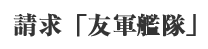
<style>
.page{position:relative;width:208px;height:49px;background:#ffffff}
.page>*{position:absolute;margin:0}
.t1{font:24px "RyuminPr6N-ExBold";color:#343434;font-weight:bold}
</style>
<div class="page">
<p class="t1" style="left:13px;top:13px;width:183px;height:24px">請求「友軍艦隊」</p>
</div>
